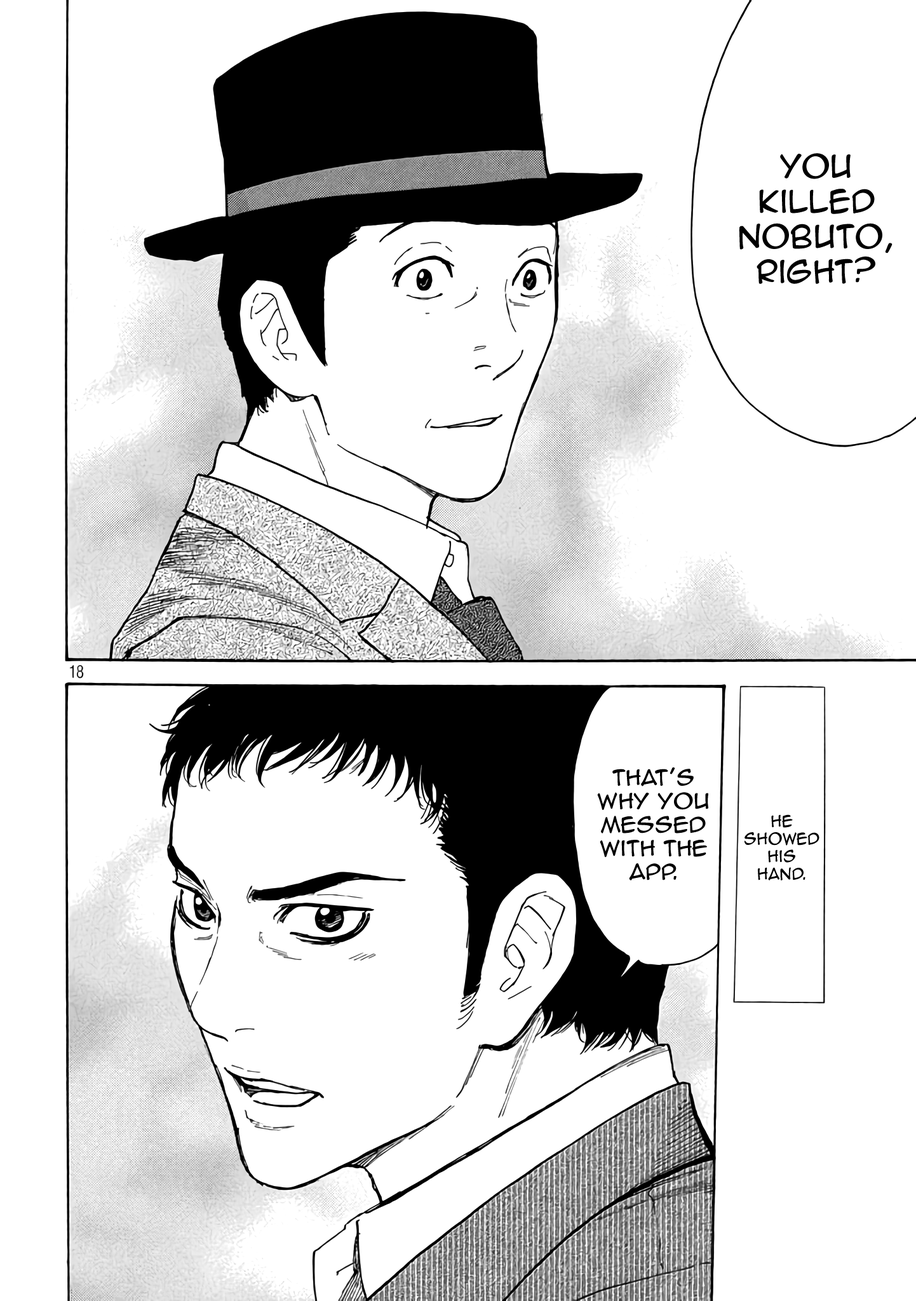
<style>
.page{position:relative;width:916px;height:1301px;background:#ffffff}
.page>*{position:absolute;margin:0}
.t1{font:29.2px "AnimeAce2.0BB";color:#000000}
.t2{font:19.6px "AnimeAce2.0BB";color:#000000;scale:1.06 1}
.t3{font:14.6px "AnimeAce2.0BB";color:#000000}
</style>
<div class="page">
<p class="t1" style="left:739px;top:153px;width:154px;height:131px;text-align:center">You <br>killed Nobuto, right?</p>
<p class="t2" style="left:597px;top:768px;width:112px;height:113px;text-align:center">That’s why you messed with the app.</p>
<p class="t3" style="left:745px;top:815px;width:75px;height:66px;text-align:center">He showed his hand.</p>
</div>
